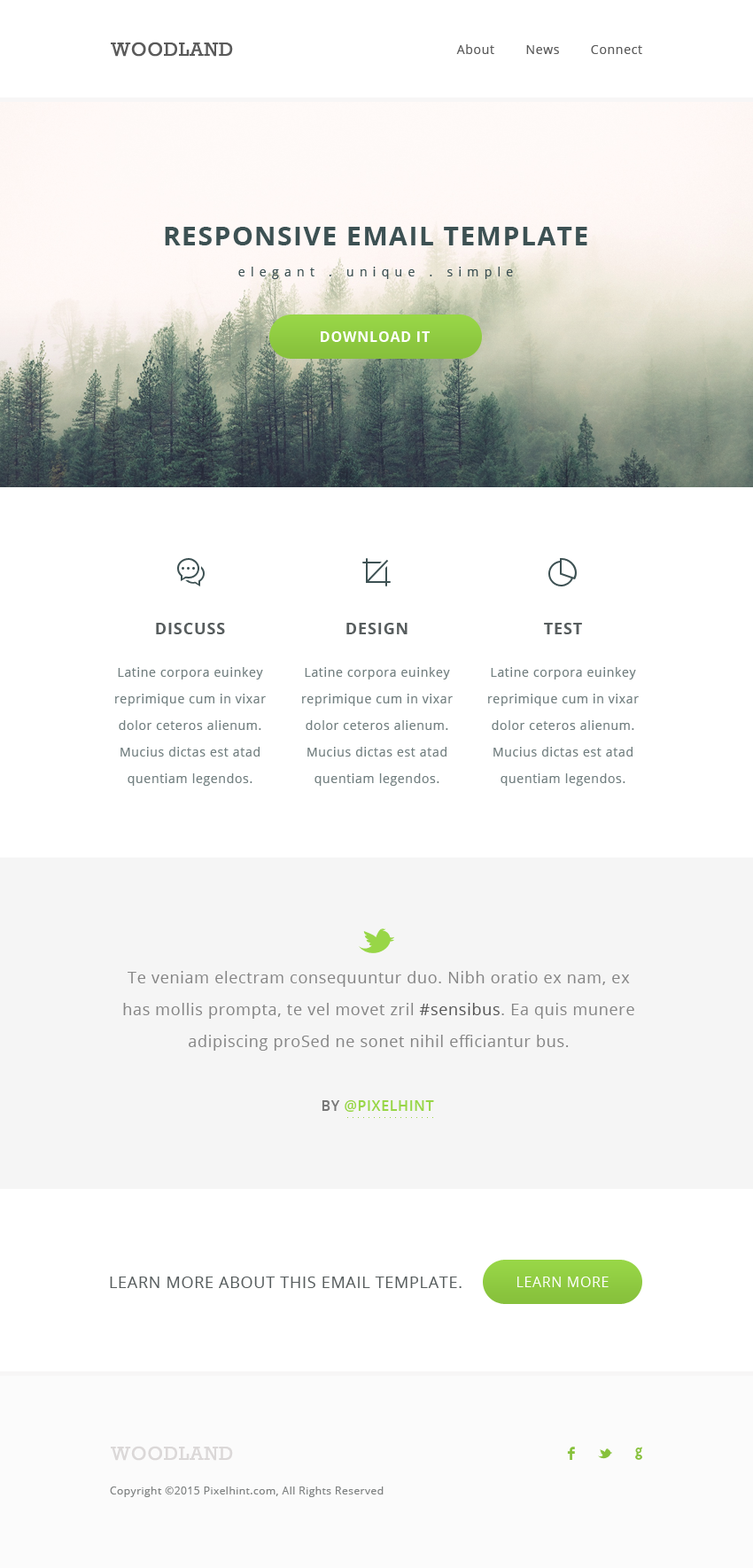
<style>
.page{position:relative;width:753px;height:1568px;background:#ffffff}
.page>*{position:absolute;margin:0}
.t1{font:19.5px "Rockwell";letter-spacing:0.04em;color:#5a5a5a;text-transform:uppercase}
.t2{font:12.4px "OpenSans";letter-spacing:0.05em;color:#5a5a5a}
.t3{font:26.6px/31px "OpenSans-Bold";letter-spacing:0.05em;color:#3d5153;text-transform:uppercase}
.t4{font:12.4px/31px "OpenSans";letter-spacing:0.45em;color:#3d5153}
.t5{font:14.2px "OpenSans-Bold";letter-spacing:0.05em;color:#ffffff;text-transform:uppercase}
.t6{font:15.9px "OpenSans-Bold";letter-spacing:0.05em;color:#575d5e;text-transform:uppercase}
.t7{font:12.4px/26.6px "OpenSans";letter-spacing:0.05em;color:#727f80}
.t8{font:15.9px/31.9px "OpenSans";letter-spacing:0.04em;color:#868686}
.t9{font:15.9px/31.9px "OpenSans";letter-spacing:0.04em;color:#575757}
.t10{font:14.2px "OpenSans-Semibold";letter-spacing:0.04em;color:#98d647;text-transform:uppercase}
.t11{font:14.2px "OpenSans-Semibold";letter-spacing:0.04em;color:#787878;text-transform:uppercase}
.t12{font:15.9px "OpenSans";letter-spacing:0.04em;color:#575d5e;text-transform:uppercase}
.t13{font:14.2px "OpenSans";letter-spacing:0.04em;color:#ffffff;text-transform:uppercase}
.t14{font:19.5px "Rockwell";letter-spacing:0.04em;color:#dbd8d8;text-transform:uppercase}
.t15{font:10.6px "OpenSans";letter-spacing:0.04em;color:#7e8181}
</style>
<div class="page">
<p class="t1" style="left:111px;top:42px;width:122px;height:15px">woodland</p>
<p class="t2" style="left:456px;top:44px;width:186px;height:10px">About        News        Connect</p>
<p class="t3" style="left:165px;top:227px;width:422px;height:52px;text-align:center">Responsive Email Template<br><span class="t4">elegant . unique . simple</span></p>
<p class="t5" style="left:321px;top:331px;width:109px;height:11px">Download it</p>
<p class="t6" style="left:156px;top:623px;width:69px;height:11px">Discuss</p>
<p class="t6" style="left:346px;top:623px;width:62px;height:11px">Design</p>
<p class="t6" style="left:544px;top:623px;width:38px;height:11px">Test</p>
<p class="t7" style="left:115px;top:667px;width:151px;height:119px;text-align:center">Latine corpora euinkey reprimique cum in vixar dolor ceteros alienum. Mucius dictas est atad  quentiam legendos.</p>
<p class="t7" style="left:302px;top:667px;width:151px;height:119px;text-align:center">Latine corpora euinkey reprimique cum in vixar dolor ceteros alienum. Mucius dictas est atad  quentiam legendos.</p>
<p class="t7" style="left:488px;top:667px;width:151px;height:119px;text-align:center">Latine corpora euinkey reprimique cum in vixar dolor ceteros alienum. Mucius dictas est atad  quentiam legendos.</p>
<p class="t8" style="left:123px;top:971px;width:511px;height:80px;text-align:center">Te veniam electram consequuntur duo. Nibh oratio ex nam, ex has mollis prompta, te vel movet zril <span class="t9">#sensibus</span>. Ea quis munere adipiscing proSed ne sonet nihil efficiantur bus.</p>
<p class="t10" style="left:322px;top:1100px;width:112px;height:12px"><span class="t11">By </span>@Pixelhint</p>
<p class="t12" style="left:110px;top:1277px;width:352px;height:11px">Learn more about this email template.</p>
<p class="t13" style="left:517px;top:1277px;width:92px;height:10px">learn more</p>
<p class="t14" style="left:111px;top:1446px;width:122px;height:15px">woodland</p>
<p class="t15" style="left:110px;top:1486px;width:274px;height:11px">Copyright ©2015 Pixelhint.com, All Rights Reserved</p>
</div>
